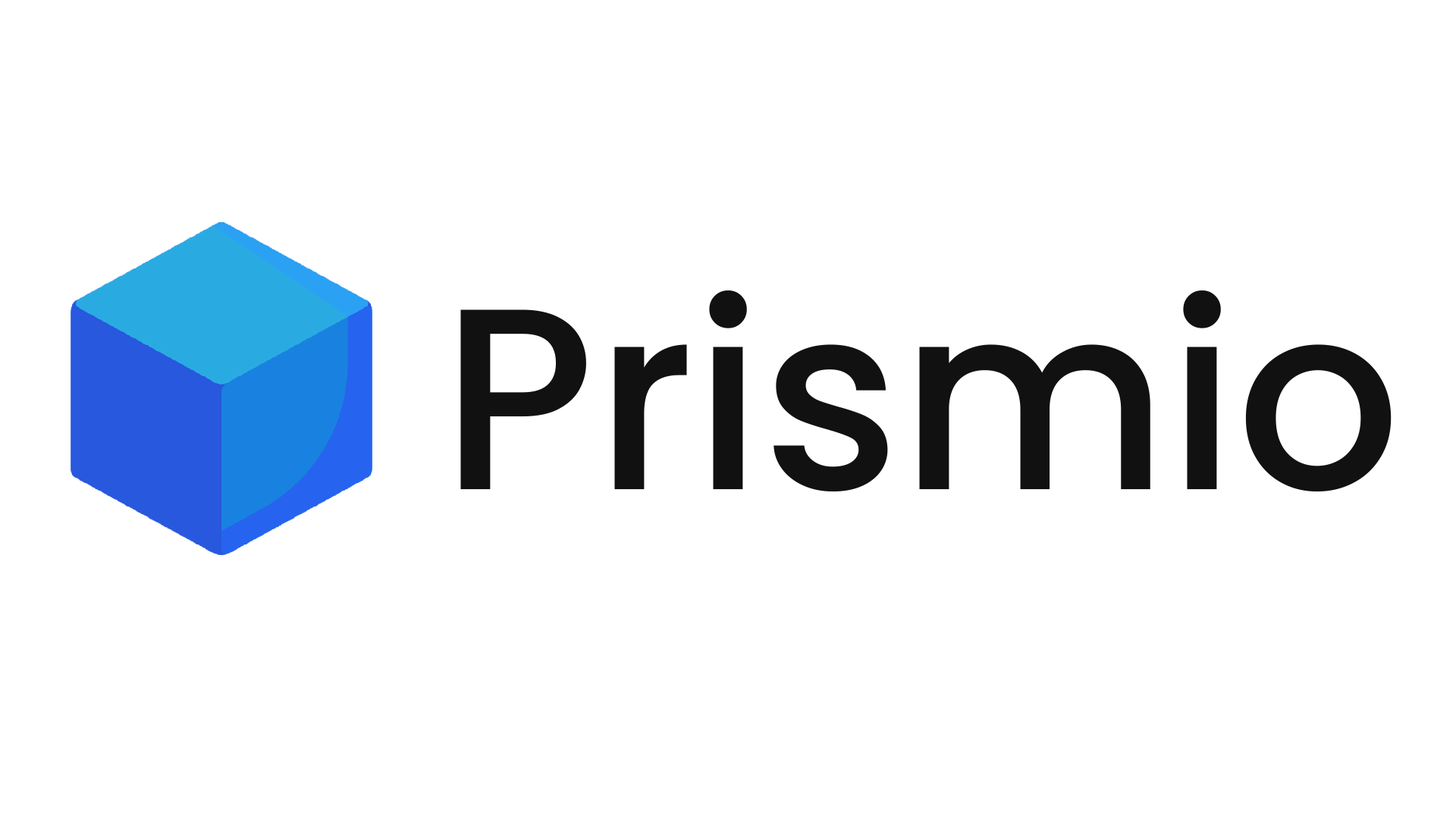
<style>
.page{position:relative;width:1456px;height:819px;background:#ffffff}
.page>*{position:absolute;margin:0}
.t1{font:258px "Poppins-Medium";color:#111111}
</style>
<div class="page">
<p class="t1" style="left:460px;top:290px;width:932px;height:202px">Prismio</p>
</div>
